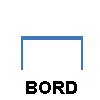
<style>
.page{position:relative;width:100px;height:100px;background:#ffffff}
.page>*{position:absolute;margin:0}
.t1{font:18px "Arial-BoldMT";color:#000000}
</style>
<div class="page">
<p class="t1" style="left:26px;top:81px;width:51px;height:13px">BORD</p>
</div>
